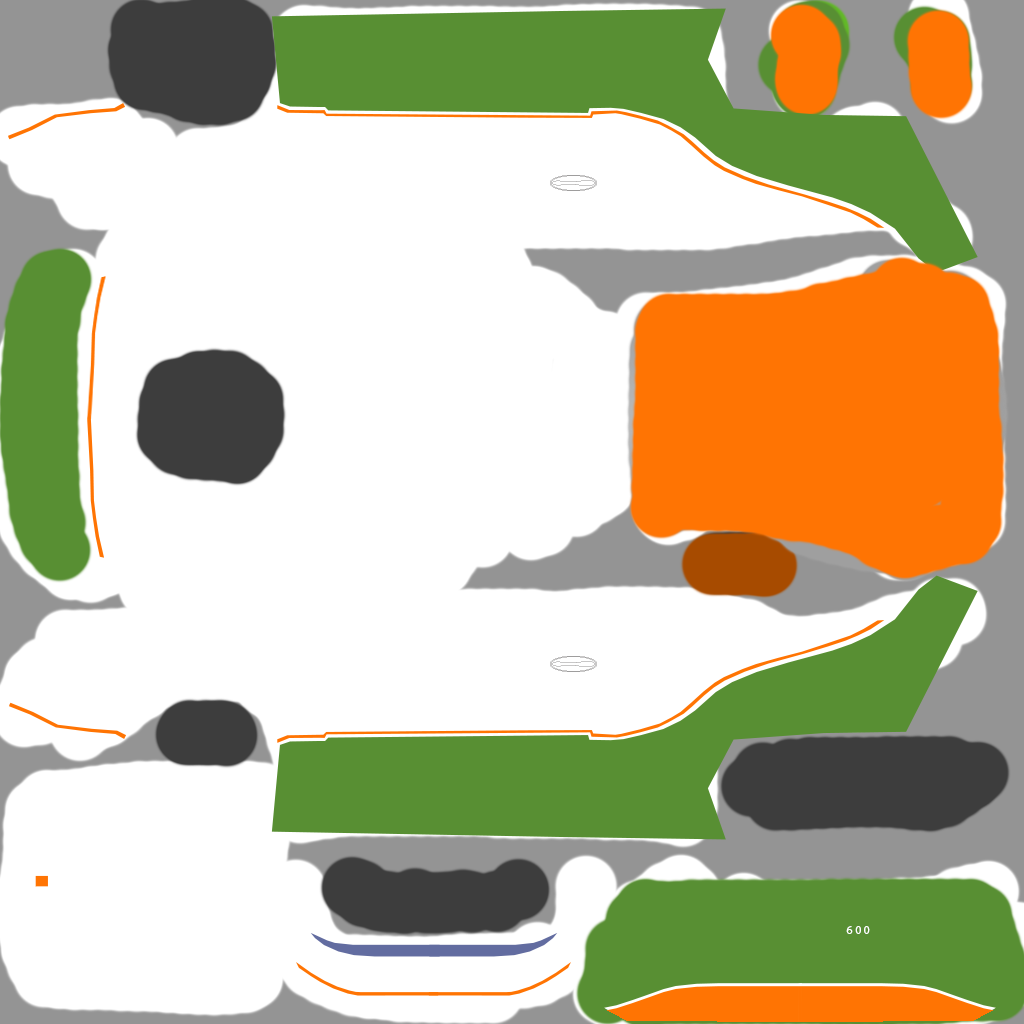
<style>
.page{position:relative;width:1024px;height:1024px;background:#ffffff}
.page>*{position:absolute;margin:0}
.t1{font:12px "MyriadPro-Regular";letter-spacing:0.2em;color:#ffffff}
</style>
<div class="page">
<p class="t1" style="left:846px;top:926px;width:24px;height:8px">600</p>
</div>
